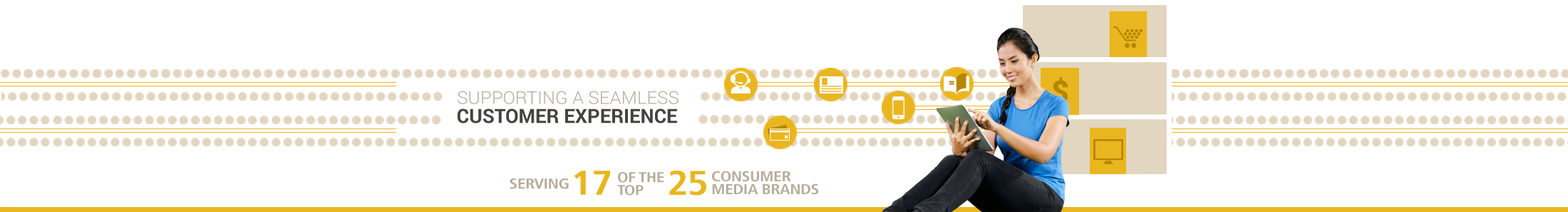
<style>
.page{position:relative;width:1568px;height:212px;background:#ffffff}
.page>*{position:absolute;margin:0}
.t1{font:34.2px "FrutigerLT-BoldCn";letter-spacing:-0.025em;color:#e9b620;scale:1.2 1}
.t2{font:14.3px/12.8px "FrutigerLT-BoldCn";letter-spacing:-0.025em;color:#b7ac9c;scale:1.2 1}
.t3{font:14.3px "FrutigerLT-BoldCn";letter-spacing:-0.025em;color:#b7ac9c;scale:1.2 1}
</style>
<div class="page">
<p class="t1" style="left:574px;top:170px;width:36px;height:25px">17</p>
<p class="t2" style="left:617px;top:172px;width:47px;height:23px">OF THE<br>TOP</p>
<p class="t1" style="left:669px;top:170px;width:37px;height:25px">25</p>
<p class="t2" style="left:712px;top:170px;width:107px;height:25px">CONSUMER<br>MEDIA BRANDS</p>
<p class="t3" style="left:510px;top:178px;width:59px;height:11px">SERVING</p>
</div>
